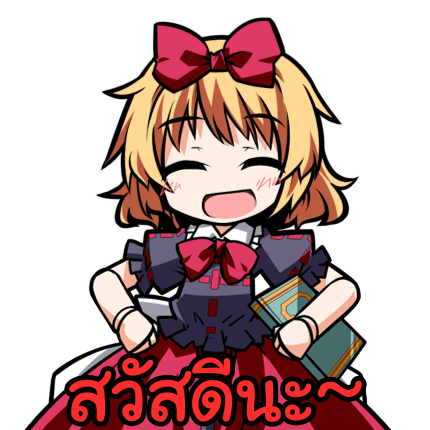
<style>
.page{position:relative;width:430px;height:430px;background:#ffffff}
.page>*{position:absolute;margin:0}
.t1{font:108px "LayijiMaHaNiYomV1.61";color:#ff2c2c}
</style>
<div class="page">
<p class="t1" style="left:69px;top:357px;width:293px;height:65px">สวัสดีนะ~</p>
</div>
